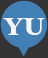
<style>
.page{position:relative;width:48px;height:58px;background:#417fb5}
.page>*{position:absolute;margin:0}
.t1{font:25.4px "HoeflerText-Black";color:#f5f5f5}
</style>
<div class="page">
<p class="t1" style="left:3px;top:18px;width:42px;height:17px">YU</p>
</div>
